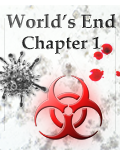
<style>
.page{position:relative;width:120px;height:150px}
.page>*{position:absolute;margin:0}
.t1{font:19.4px "PalatinoLinotype-Bold"}
.t2{font:18px "PalatinoLinotype-Bold"}
</style>
<div class="page">
<p class="t1" style="left:6px;top:14px;width:110px;height:40px;text-align:center">World’s End<br><span class="t2">Chapter 1</span></p>
</div>
